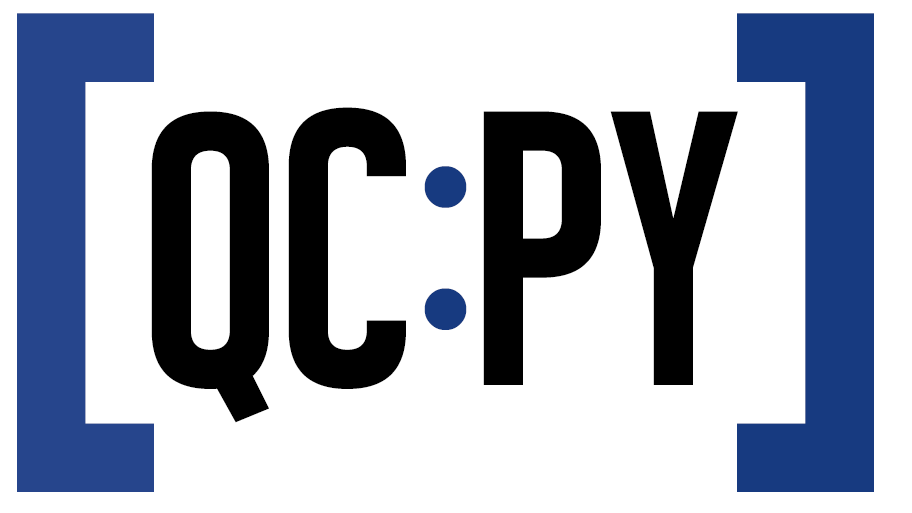
<style>
.page{position:relative;width:912px;height:513px;background:#ffffff}
.page>*{position:absolute;margin:0}
.t1{font:400px "AlegreSans";color:#000000}
.t2{font:700px "AlegreSans";letter-spacing:-0.041em;color:#26458c}
.t3{font:300px "Comfortaa-Bold";color:#173a80}
.t4{font:400px "AlegreSans";letter-spacing:-0.045em;color:#000000}
.t5{font:700px "AlegreSans";letter-spacing:-0.045em;color:#173a80}
</style>
<div class="page">
<p class="t1" style="left:17px;top:13px;width:857px;height:479px"><span class="t2">[</span>QC<span class="t3">:</span>P<span class="t4">Y</span><span class="t5">]</span></p>
</div>
